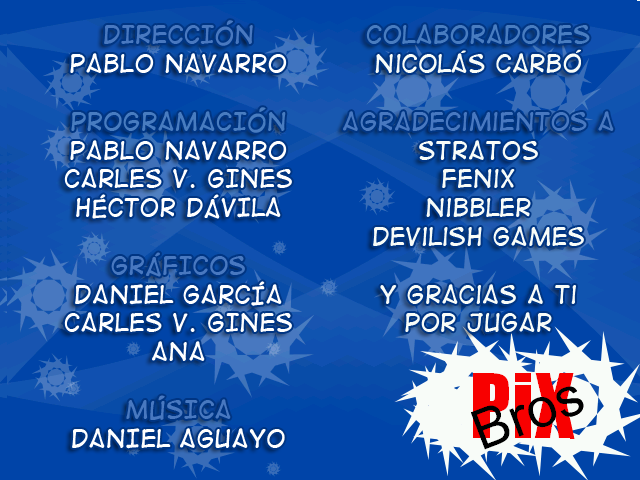
<style>
.page{position:relative;width:640px;height:480px;background:#0044a8}
.page>*{position:absolute;margin:0}
.t1{font:24px "DigitalStrip2";color:#ffffff}
.t2{font:24px "DigitalStrip2";color:#4878c0}
.t3{font:24px "DigitalStrip2";color:#487cc0}
.t4{font:24px "DigitalStrip2";color:#f8fcf8}
</style>
<div class="page">
<p class="t1" style="left:64px;top:20px;width:228px;height:429px;text-align:center"><span class="t2">dIRECCIÓN<br></span>PABLO NAVARRO<br><br><span class="t3">PROGRAMACIÓN<br></span>pABLO nAVARRO<br>cARLES v. gINES<br>Héctor Dávila<br><br><span class="t2">GRÁFICOS<br></span>Daniel García<br>CARLES V. GINES<br>ANA<br><br><span class="t2">MÚSICA<br></span>Daniel Aguayo</p>
<p class="t4" style="left:343px;top:24px;width:271px;height:308px;text-align:center"><span class="t3">colaboradores<br></span>nicolás carbó<br><br><span class="t2">agradecimientos a<br></span>Stratos<br>fenix<br>nibbler<br>devilish games<br><br>y gracias a ti<br>por jugar</p>
</div>
